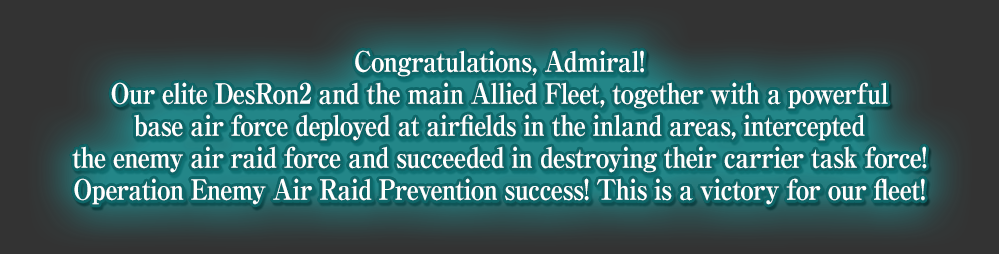
<style>
.page{position:relative;width:999px;height:254px;background:#333333}
.page>*{position:absolute;margin:0}
.t1{font:28px/32px "RyuminPro-ExBold";letter-spacing:-0.04em;color:#ffffff;scale:0.9 1}
</style>
<div class="page">
<p class="t1" style="left:72px;top:50px;width:855px;height:155px;text-align:center">Congratulations, Admiral!<br>Our elite DesRon2 and the main Allied Fleet, together with a powerful<br>base air force deployed at airfields in the inland areas, intercepted<br>the enemy air raid force and succeeded in destroying their carrier task force!<br>Operation Enemy Air Raid Prevention success! This is a victory for our fleet!</p>
</div>
